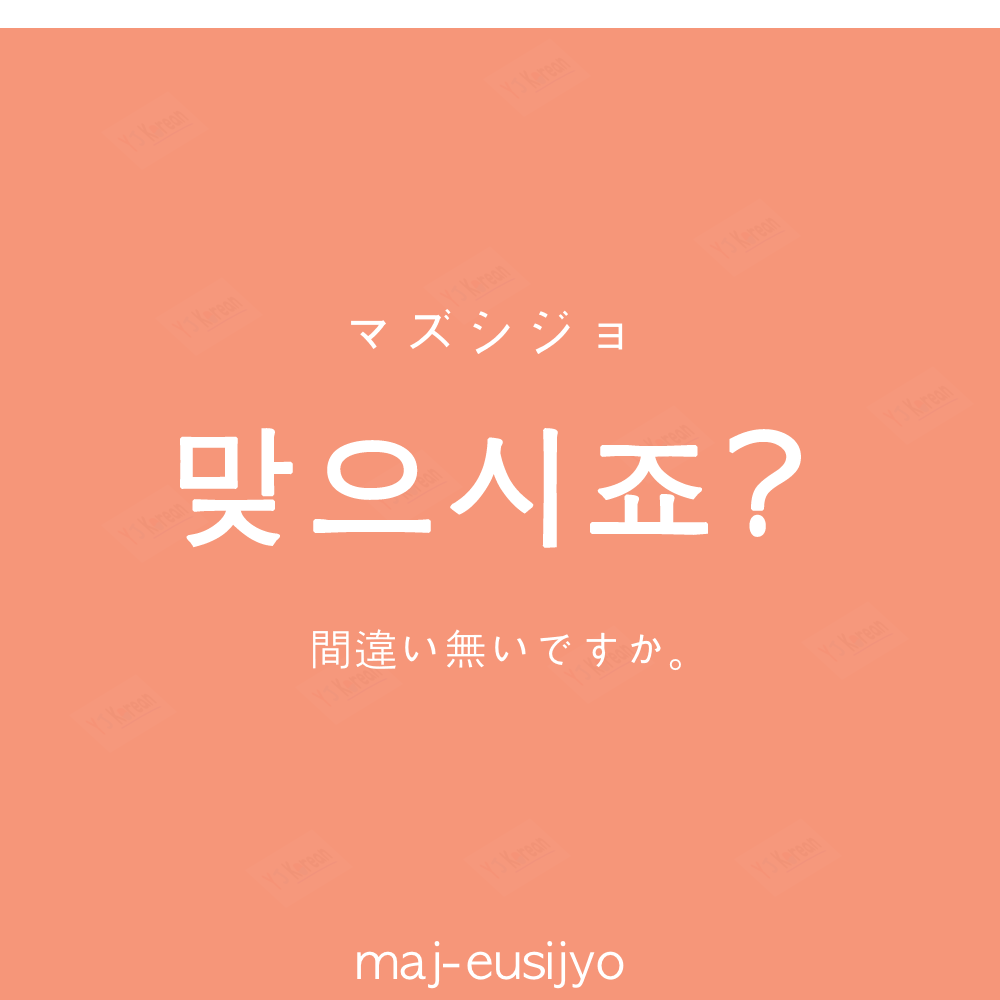
<style>
.page{position:relative;width:1000px;height:1000px;background:#f69679}
.page>*{position:absolute;margin:0}
.t1{font:60px "AppleGothic";color:#ffffff}
.t2{font:130px "AppleGothic";letter-spacing:0.04em;color:#ffffff;font-weight:bold}
.t3{font:45px "AppleGothic";color:#ffffff}
.t4{font:50px "AppleGothic";color:#ffffff}
</style>
<div class="page">
<p class="t1" style="left:351px;top:309px;width:272px;height:45px">マズシジョ</p>
<p class="t2" style="left:180px;top:428px;width:621px;height:120px">맞으시죠?</p>
<p class="t3" style="left:313px;top:629px;width:368px;height:42px">間違い無いですか。</p>
<p class="t4" style="left:357px;top:941px;width:267px;height:48px">maj-eusijyo</p>
</div>
